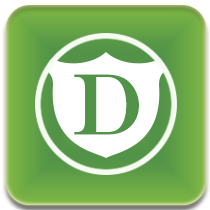
<style>
.page{position:relative;width:210px;height:210px}
.page>*{position:absolute;margin:0}
.t1{font:86.4px "EngraversMT";color:#529447;font-weight:bold;scale:0.83 1}
</style>
<div class="page">
<p class="t1" style="left:74px;top:74px;width:65px;height:61px">D</p>
</div>
